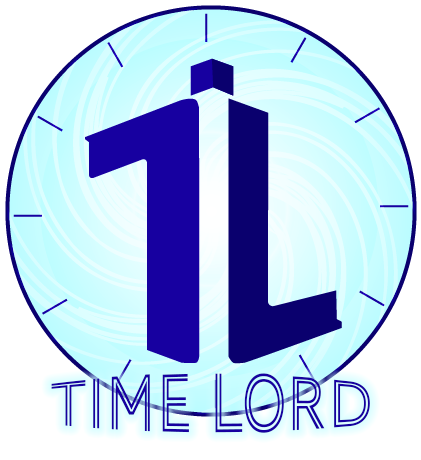
<style>
.page{position:relative;width:421px;height:460px;background:#ffffff}
.page>*{position:absolute;margin:0}
.t1{font:60px "AWConquerorStdInline-Regular";color:#1700a0}
</style>
<div class="page">
<p class="t1" style="left:51px;top:373px;width:319px;height:60px">Time Lord</p>
</div>
